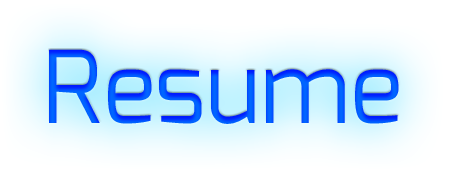
<style>
.page{position:relative;width:449px;height:174px}
.page>*{position:absolute;margin:0}
.t1{font:100px "Exo-Regular";color:#0054ff}
</style>
<div class="page">
<p class="t1" style="left:49px;top:49px;width:350px;height:75px">Resume</p>
</div>
